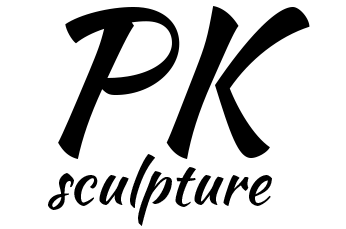
<style>
.page{position:relative;width:346px;height:229px;background:#ffffff}
.page>*{position:absolute;margin:0}
.t1{font:185.7px "KaushanScript-Regular";color:#000000}
.t2{font:60.7px "KaushanScript-Regular";color:#000000}
</style>
<div class="page">
<p class="t1" style="left:58px;top:6px;width:252px;height:153px">PK</p>
<p class="t2" style="left:48px;top:154px;width:224px;height:72px">sculpture</p>
</div>
